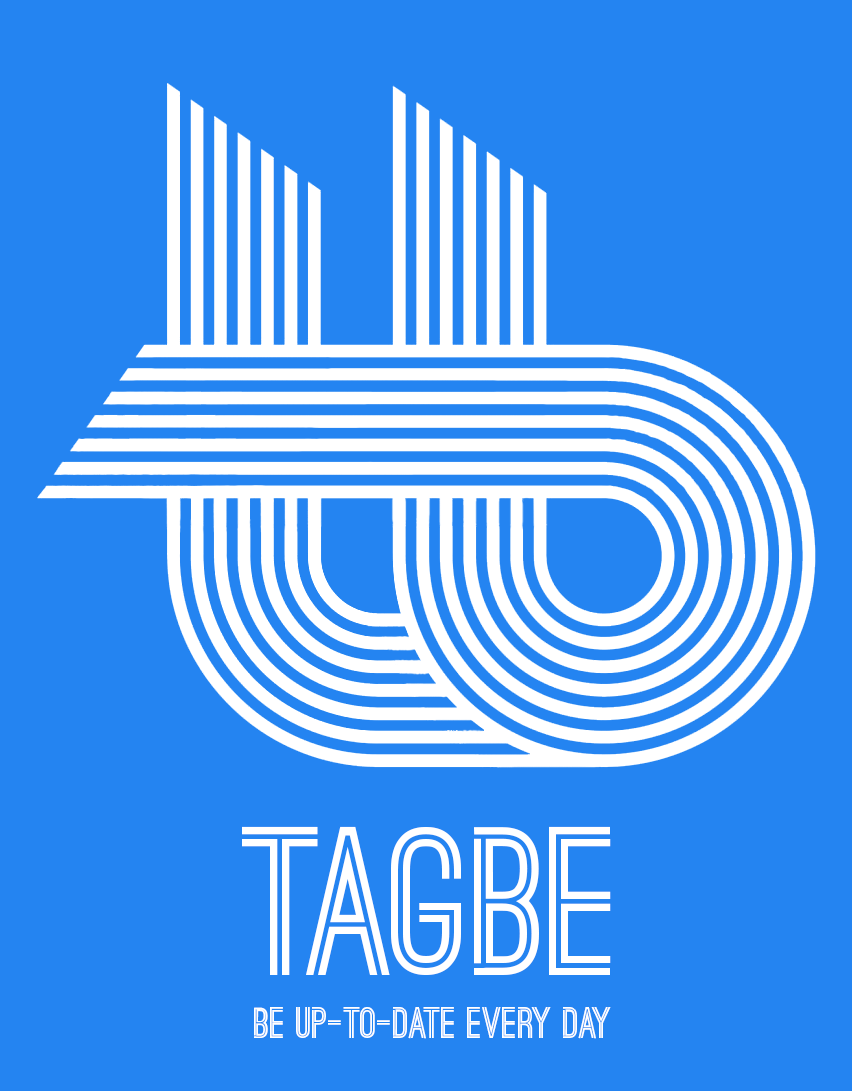
<style>
.page{position:relative;width:852px;height:1091px;background:#2484f1}
.page>*{position:absolute;margin:0}
.t1{font:200px "OstrichSans-Bold";color:#ffffff}
.t2{font:41.3px "OstrichSans-Bold";color:#ffffff}
</style>
<div class="page">
<p class="t1" style="left:242px;top:826px;width:369px;height:149px">TAGBE</p>
<p class="t2" style="left:254px;top:1007px;width:357px;height:32px">Be Up-To-Date Every Day</p>
</div>
